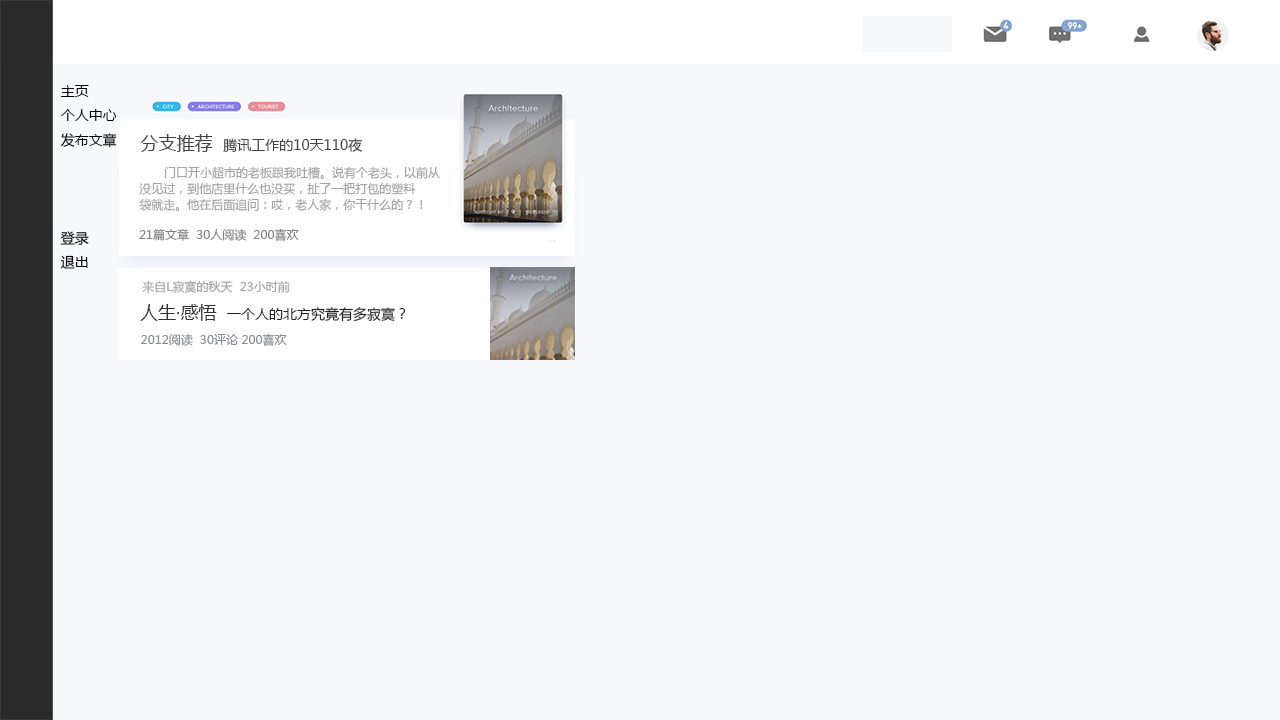
<style>
.page{position:relative;width:1280px;height:720px;background:#f7f8fb}
.page>*{position:absolute;margin:0}
.t1{font:14px "MicrosoftYaHei";color:#000000}
.t2{font:14px "MicrosoftYaHei";color:#434343}
.t3{font:18px "MicrosoftYaHei";color:#434343}
.t4{font:12px/16px "MicrosoftYaHei";color:#a4a4a4}
.t5{font:12px "MicrosoftYaHei";color:#838383}
.t6{font:12px "MicrosoftYaHei";color:#a4a4a4}
.t7{font:14px "MicrosoftYaHei";color:#202020}
.t8{font:18px "MicrosoftYaHei";color:#313131}
.t9{font:12px "MicrosoftYaHei";color:#8b8c90}
</style>
<div class="page">
<p class="t1" style="left:60px;top:85px;width:57px;height:184px">主页<br>个人中心<br>发布文章<br><br><br><br>登录<br>退出</p>
<p class="t2" style="left:140px;top:134px;width:223px;height:18px"><span class="t3">分支推荐  </span>腾讯工作的10天110夜</p>
<p class="t4" style="left:139px;top:166px;width:301px;height:45px">门口开小超市的老板跟我吐槽。说有个老头，以前从<br>没见过，到他店里什么也没买，扯了一把打包的塑料<br>袋就走。他在后面追问：哎，老人家，你干什么的？！</p>
<p class="t5" style="left:139px;top:228px;width:160px;height:13px">21篇文章  30人阅读  200喜欢</p>
<p class="t6" style="left:142px;top:280px;width:148px;height:13px">来自L寂寞的秋天  23小时前</p>
<p class="t7" style="left:140px;top:304px;width:266px;height:18px"><span class="t8">人生·感悟  </span>一个人的北方究竟有多寂寞？</p>
<p class="t9" style="left:141px;top:333px;width:146px;height:13px">2012阅读  30评论 200喜欢</p>
</div>
